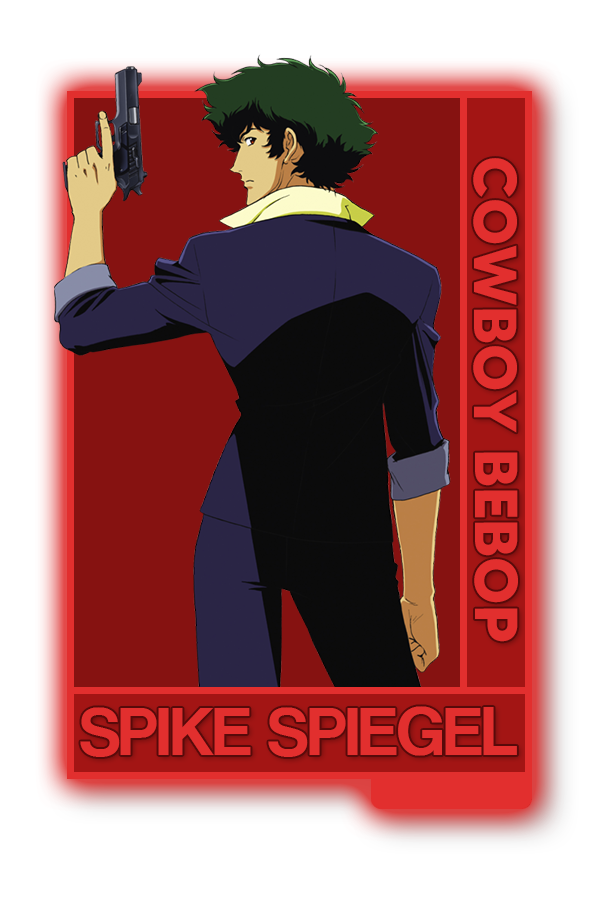
<style>
.page{position:relative;width:600px;height:900px;background:#ffffff}
.page>*{position:absolute;margin:0}
.t1{font:60.5px "MADETOMMY-Bold";color:#e22f2e}
.t2{font:70.9px "CoolveticaRg-Regular";color:#e22f2e}
</style>
<div class="page">
<p class="t1" style="left:473px;top:158px;width:45px;height:484px;rotate:90deg">COWBOY BEBOP</p>
<p class="t2" style="left:80px;top:706px;width:437px;height:51px">SPIKE SPIEGEL</p>
</div>
